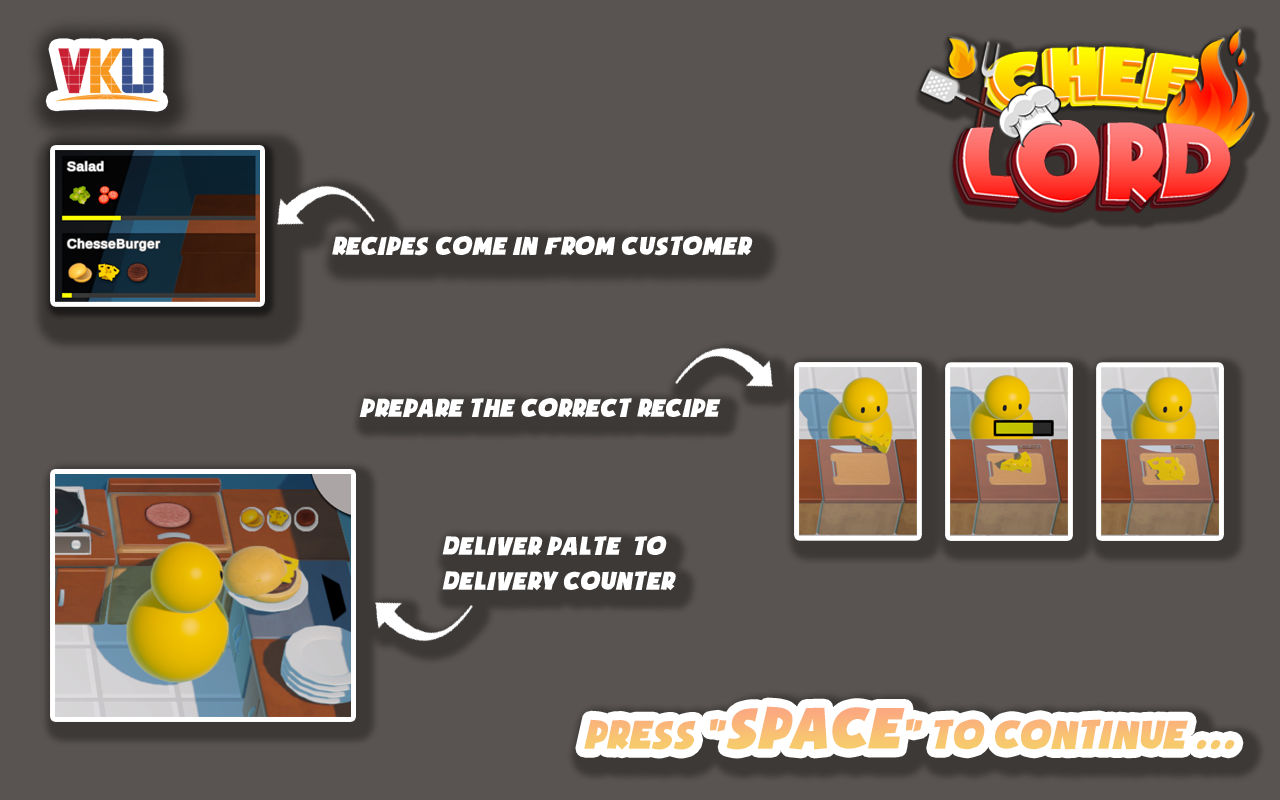
<style>
.page{position:relative;width:1280px;height:800px;background:#595451}
.page>*{position:absolute;margin:0}
.t1{font:29.2px "iCielSoupofJustice";color:#ffffff;font-style:italic}
.t2{font:45.8px "iCielSoupofJustice";color:#f9bf75;font-style:italic}
.t3{font:66.7px "iCielSoupofJustice";color:#f9bf75;font-style:italic}
</style>
<div class="page">
<p class="t1" style="left:332px;top:236px;width:421px;height:20px">RECIPES COME IN FROM CUSTOMER</p>
<p class="t1" style="left:359px;top:398px;width:362px;height:20px">Prepare the correct Recipe</p>
<p class="t1" style="left:442px;top:536px;width:234px;height:55px">dELIVER PALTE  TO<br>DELIVERY COUNTER</p>
<p class="t2" style="left:584px;top:706px;width:651px;height:44px">press "<span class="t3">SPACE</span>" to continue ...</p>
</div>
